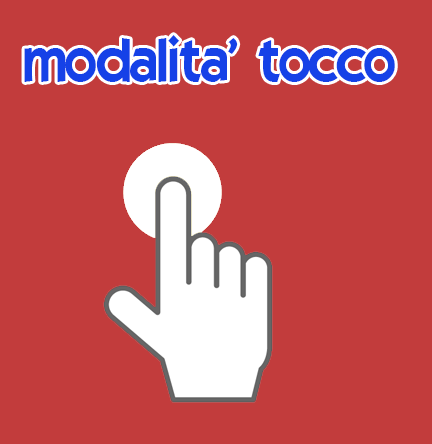
<style>
.page{position:relative;width:432px;height:444px;background:#c23c3c}
.page>*{position:absolute;margin:0}
.t1{font:60px "ELEGANCE";color:#1541e7}
</style>
<div class="page">
<p class="t1" style="left:24px;top:35px;width:371px;height:47px">modalita' tocco</p>
</div>
